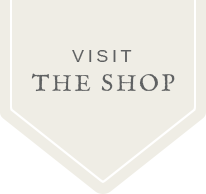
<style>
.page{position:relative;width:206px;height:194px;background:#efede5}
.page>*{position:absolute;margin:0}
.t1{font:18px "Arimo";letter-spacing:0.2em;color:#5f6162;text-transform:uppercase}
.t2{font:24px "IM_FELL_English_PRO_Roman";letter-spacing:0.1em;color:#5f6162;text-transform:uppercase}
</style>
<div class="page">
<p class="t1" style="left:72px;top:50px;width:60px;height:12px">visit</p>
<p class="t2" style="left:31px;top:73px;width:144px;height:19px">the shop</p>
</div>
